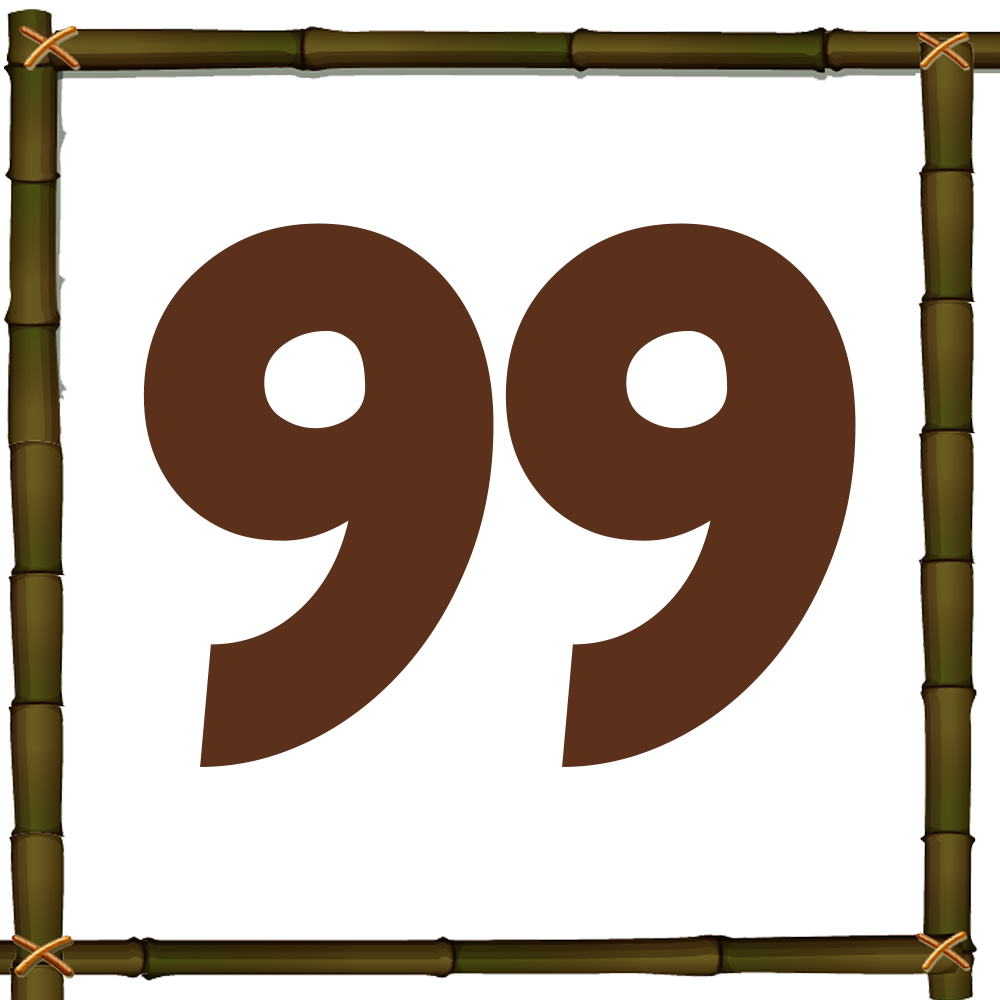
<style>
.page{position:relative;width:1000px;height:1000px;background:#ffffff}
.page>*{position:absolute;margin:0}
.t1{font:738.3px "Bangers-Regular";color:#5c311b;text-transform:uppercase}
</style>
<div class="page">
<p class="t1" style="left:143px;top:223px;width:713px;height:544px">99</p>
</div>
